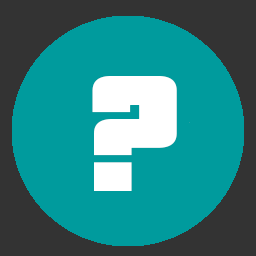
<style>
.page{position:relative;width:256px;height:256px;background:#009b9d}
.page>*{position:absolute;margin:0}
.t1{font:180px "PricedownBl-Regular";color:#ffffff}
</style>
<div class="page">
<p class="t1" style="left:92px;top:76px;width:85px;height:115px">?</p>
</div>
